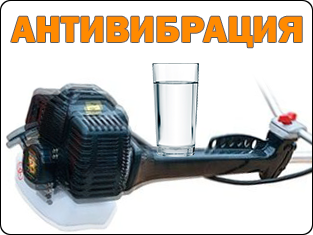
<style>
.page{position:relative;width:313px;height:235px;background:#ffffff}
.page>*{position:absolute;margin:0}
.t1{font:38px "FranklinGothic-Heavy";color:#ff8a00}
</style>
<div class="page">
<p class="t1" style="left:11px;top:16px;width:291px;height:32px">АНТИВИБРАЦИЯ</p>
</div>
